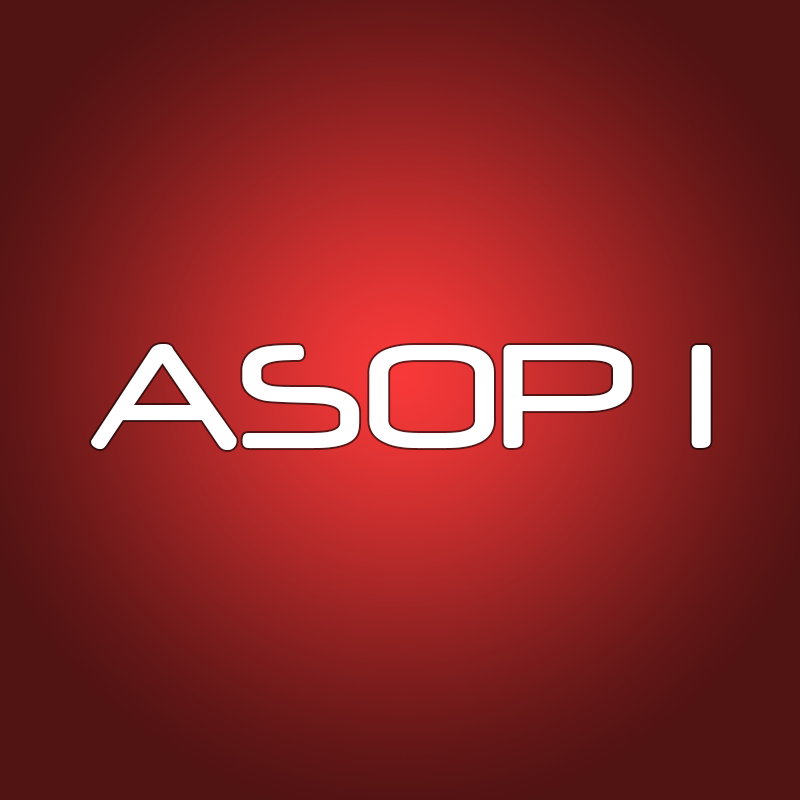
<style>
.page{position:relative;width:800px;height:800px}
.page>*{position:absolute;margin:0}
.t1{font:173px "Neuropol";color:#ffffff}
</style>
<div class="page">
<p class="t1" style="left:91px;top:344px;width:620px;height:106px">ASOP 1</p>
</div>
